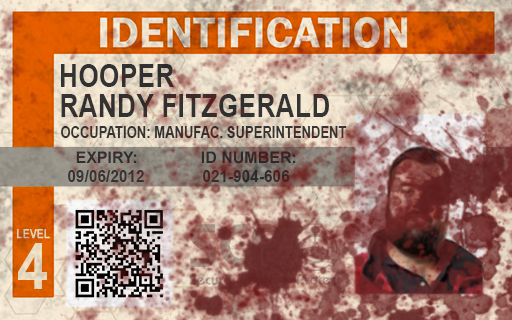
<style>
.page{position:relative;width:512px;height:320px}
.page>*{position:absolute;margin:0}
.t1{font:32px "Arial-BoldMT";letter-spacing:0.01em;color:#363636;scale:0.82 1}
.t2{font:17.2px "Arial-BoldMT";letter-spacing:0.01em;color:#383838;scale:0.75 1}
.t3{font:16.4px "Arial-BoldMT";letter-spacing:0.01em;color:#383838;scale:0.92 1}
.t4{font:65px "Arial-BoldMT";letter-spacing:0.01em;color:#faeccf;scale:0.86 1}
</style>
<div class="page">
<p class="t1" style="left:61px;top:64px;width:113px;height:23px">HOOPER</p>
<p class="t1" style="left:61px;top:94px;width:268px;height:23px">RANDY FITZGERALD</p>
<p class="t2" style="left:61px;top:126px;width:286px;height:12px">OCCUPATION: MANUFAC. SUPERINTENDENT</p>
<p class="t3" style="left:68px;top:170px;width:76px;height:12px">09/06/2012</p>
<p class="t3" style="left:203px;top:170px;width:87px;height:12px">021-904-606</p>
<p class="t4" style="left:18px;top:243px;width:29px;height:46px">4</p>
</div>
